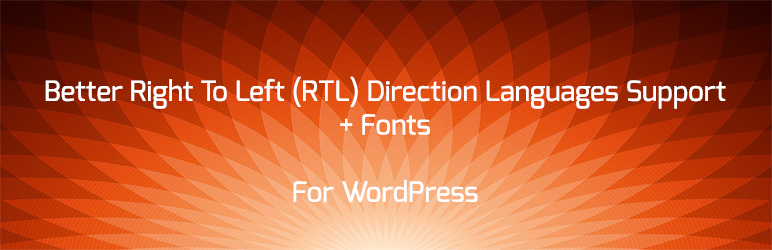
<style>
.page{position:relative;width:772px;height:250px}
.page>*{position:absolute;margin:0}
.t1{font:28px "Exo-Medium";color:#ffffff}
</style>
<div class="page">
<p class="t1" style="left:45px;top:76px;width:681px;height:126px;text-align:center">Better Right To Left (RTL) Direction Languages Support<br>Fonts +<br><br>For WordPress</p>
</div>
